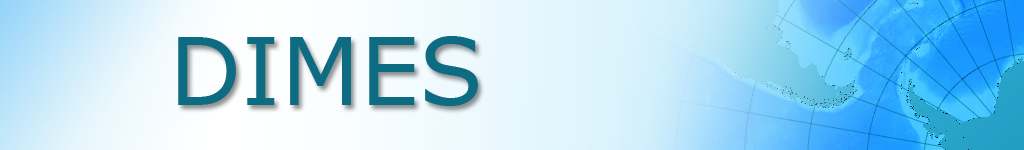
<style>
.page{position:relative;width:1024px;height:150px}
.page>*{position:absolute;margin:0}
.t1{font:93.8px "Verdana";color:#0d6c82}
</style>
<div class="page">
<p class="t1" style="left:178px;top:36px;width:300px;height:70px">DIMES</p>
</div>
